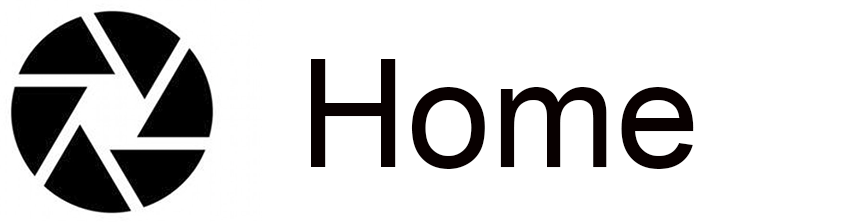
<style>
.page{position:relative;width:858px;height:222px;background:#ffffff}
.page>*{position:absolute;margin:0}
.t1{font:150px "ArialMT";color:#080000}
</style>
<div class="page">
<p class="t1" style="left:311px;top:59px;width:383px;height:110px">Home</p>
</div>
